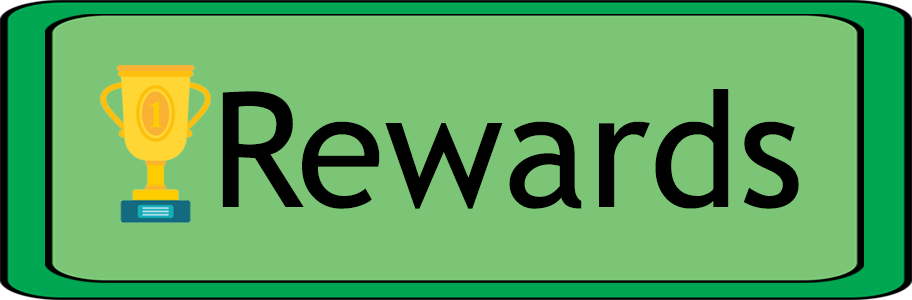
<style>
.page{position:relative;width:912px;height:300px;background:#7cc576}
.page>*{position:absolute;margin:0}
.t1{font:160px "TrebuchetMS";color:#000000}
</style>
<div class="page">
<p class="t1" style="left:222px;top:89px;width:577px;height:120px">Rewards</p>
</div>
